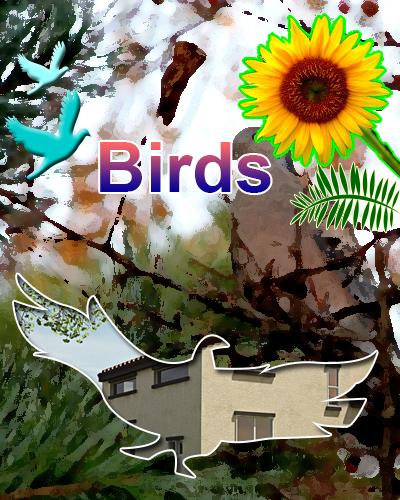
<style>
.page{position:relative;width:400px;height:500px}
.page>*{position:absolute;margin:0}
.t1{font:69.7px "Arial-BoldMT"}
</style>
<div class="page">
<p class="t1" style="left:100px;top:142px;width:171px;height:51px">Birds</p>
</div>
